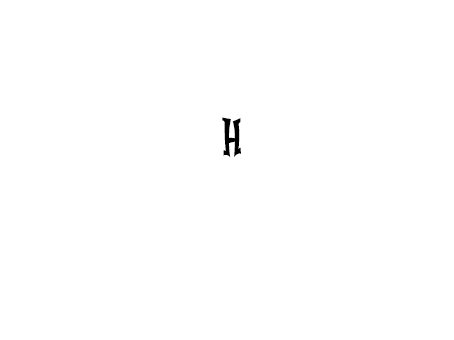
<style>
.page{position:relative;width:454px;height:340px;background:#ffffff}
.page>*{position:absolute;margin:0}
.t1{font:47.9px "Ravie";color:#000000;scale:0.44 1}
</style>
<div class="page">
<p class="t1" style="left:222px;top:117px;width:19px;height:41px;rotate:-1deg">H</p>
</div>
